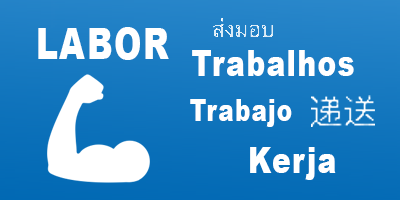
<style>
.page{position:relative;width:400px;height:200px}
.page>*{position:absolute;margin:0}
.t1{font:42.9px "Arial-Black";letter-spacing:0.05em;color:#ffffff;scale:0.77 1}
.t2{font:36.4px "Arial-Black";letter-spacing:0.05em;color:#ffffff;scale:0.77 1}
.t3{font:29.9px "Arial-Black";letter-spacing:0.05em;color:#ffffff;scale:0.77 1}
</style>
<div class="page">
<p class="t1" style="left:38px;top:27px;width:131px;height:33px">LABOR</p>
<p class="t2" style="left:192px;top:50px;width:162px;height:26px">Trabalhos</p>
<p class="t3" style="left:190px;top:99px;width:102px;height:28px">Trabajo</p>
<p class="t2" style="left:250px;top:147px;width:86px;height:33px">Kerja</p>
</div>
